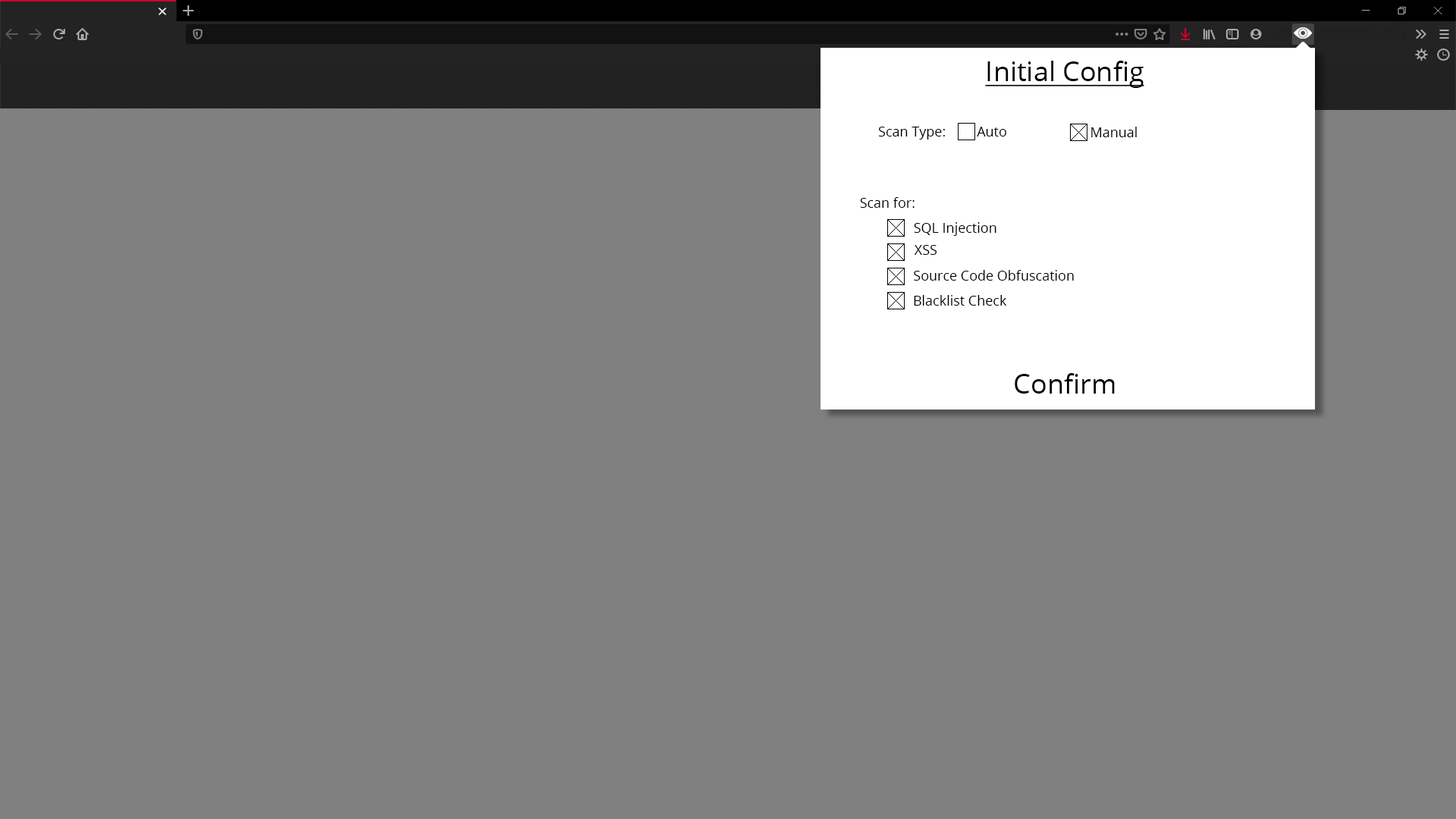
<style>
.page{position:relative;width:1456px;height:819px;background:#808080}
.page>*{position:absolute;margin:0}
.t1{font:27.3px "OpenSans-Regular";color:#000000;text-decoration:underline}
.t2{font:13.6px "OpenSans-Regular";color:#000000}
.t3{font:27.3px "OpenSans-Regular";color:#000000}
</style>
<div class="page">
<p class="t1" style="left:985px;top:61px;width:159px;height:27px">Initial Config</p>
<p class="t2" style="left:878px;top:127px;width:67px;height:13px">Scan Type:</p>
<p class="t2" style="left:977px;top:127px;width:29px;height:9px">Auto</p>
<p class="t2" style="left:1091px;top:127px;width:46px;height:10px">Manual</p>
<p class="t2" style="left:860px;top:197px;width:55px;height:11px">Scan for:</p>
<p class="t2" style="left:914px;top:222px;width:82px;height:14px">SQL Injection</p>
<p class="t2" style="left:914px;top:245px;width:23px;height:10px">XSS</p>
<p class="t2" style="left:914px;top:270px;width:160px;height:11px">Source Code Obfuscation</p>
<p class="t2" style="left:914px;top:295px;width:93px;height:11px">Blacklist Check</p>
<p class="t3" style="left:1015px;top:373px;width:100px;height:21px">Confirm</p>
</div>
